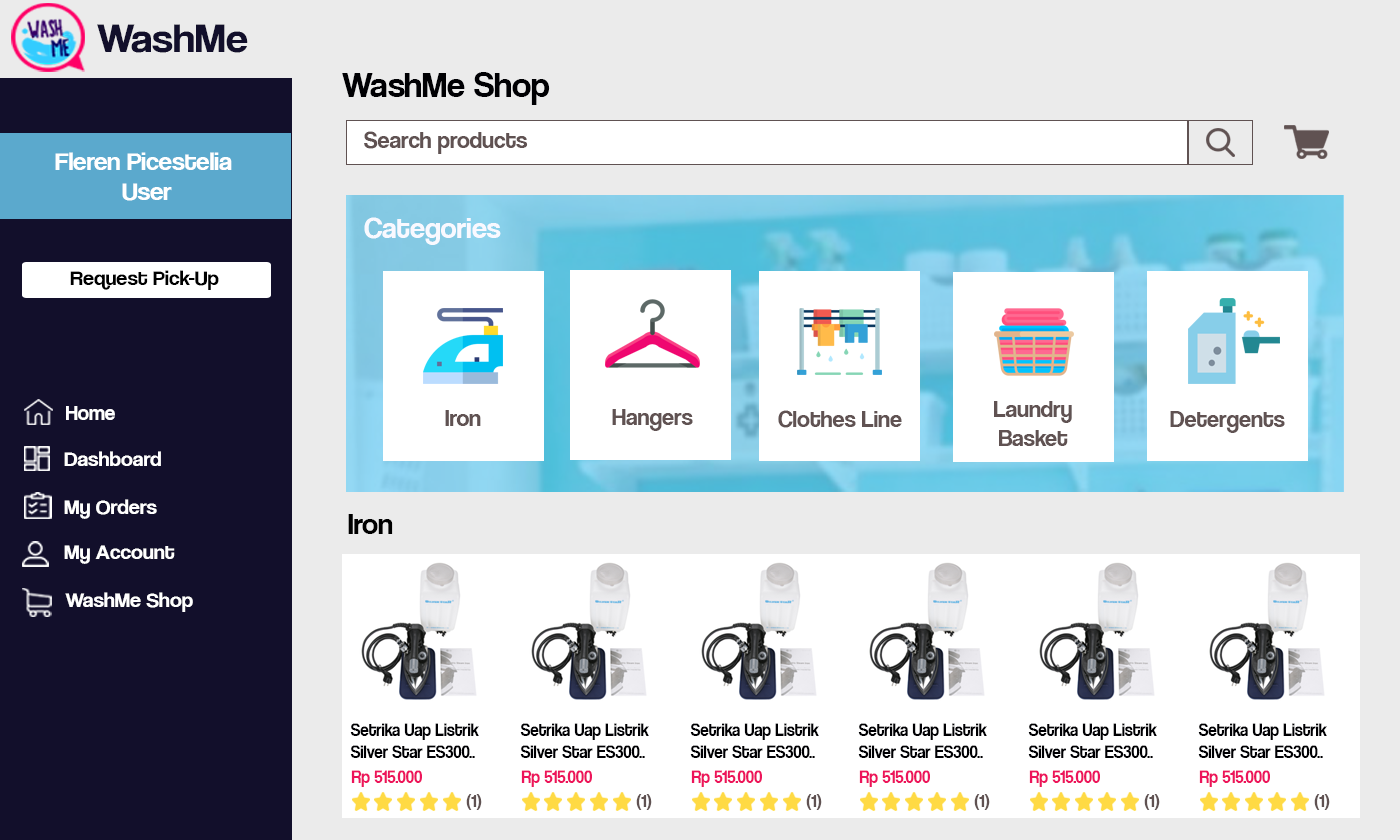
<style>
.page{position:relative;width:1400px;height:840px;background:#ebebeb}
.page>*{position:absolute;margin:0}
.t1{font:42.1px "CoolveticaRg-Regular";color:#120f2b;scale:1.05 1}
.t2{font:36px "CoolveticaRg-Regular";color:#000003}
.t3{font:24px "CoolveticaRg-Regular";color:#605252}
.t4{font:25.2px "CoolveticaRg-Regular";color:#ffffff;scale:1.05 1}
.t5{font:30px "CoolveticaRg-Regular";color:#f9f9ff}
.t6{font:21px "CoolveticaRg-Regular";color:#000000;scale:1.05 1}
.t7{font:21px "CoolveticaRg-Regular";color:#ffffff}
.t8{font:21px "CoolveticaRg-Regular";color:#ffffff;scale:1.05 1}
.t9{font:30px "CoolveticaRg-Regular";color:#000000}
.t10{font:18px "CoolveticaRg-Regular";color:#000003;scale:0.94 1}
.t11{font:18px "CoolveticaRg-Regular";color:#ed145b;scale:0.94 1}
.t12{font:18px "CoolveticaRg-Regular";color:#605252}
</style>
<div class="page">
<p class="t1" style="left:97px;top:24px;width:151px;height:29px">WashMe</p>
<p class="t2" style="left:342px;top:72px;width:208px;height:33px">WashMe Shop</p>
<p class="t3" style="left:364px;top:131px;width:164px;height:23px">Search products</p>
<p class="t4" style="left:55px;top:152px;width:177px;height:49px;text-align:center">Fleren Picestelia<br> User</p>
<p class="t5" style="left:364px;top:217px;width:137px;height:28px">Categories</p>
<p class="t6" style="left:70px;top:270px;width:149px;height:20px">Request Pick-Up</p>
<p class="t3" style="left:994px;top:401px;width:78px;height:45px;text-align:center">Laundry<br>Basket</p>
<p class="t7" style="left:66px;top:406px;width:49px;height:14px">Home</p>
<p class="t3" style="left:445px;top:410px;width:36px;height:16px">Iron</p>
<p class="t3" style="left:612px;top:409px;width:81px;height:22px">Hangers</p>
<p class="t3" style="left:778px;top:410px;width:124px;height:18px">Clothes Line</p>
<p class="t3" style="left:1170px;top:411px;width:115px;height:22px">Detergents</p>
<p class="t8" style="left:64px;top:451px;width:97px;height:15px">Dashboard</p>
<p class="t8" style="left:64px;top:499px;width:93px;height:20px">My Orders</p>
<p class="t9" style="left:348px;top:514px;width:45px;height:20px">Iron</p>
<p class="t8" style="left:64px;top:545px;width:111px;height:19px">My Account</p>
<p class="t8" style="left:65px;top:592px;width:128px;height:20px">WashMe Shop</p>
<p class="t10" style="left:350px;top:723px;width:129px;height:35px">Setrika Uap Listrik<br>Silver Star ES300..</p>
<p class="t10" style="left:520px;top:723px;width:129px;height:35px">Setrika Uap Listrik<br>Silver Star ES300..</p>
<p class="t10" style="left:690px;top:723px;width:129px;height:35px">Setrika Uap Listrik<br>Silver Star ES300..</p>
<p class="t10" style="left:858px;top:723px;width:129px;height:35px">Setrika Uap Listrik<br>Silver Star ES300..</p>
<p class="t10" style="left:1028px;top:723px;width:129px;height:35px">Setrika Uap Listrik<br>Silver Star ES300..</p>
<p class="t10" style="left:1198px;top:723px;width:129px;height:35px">Setrika Uap Listrik<br>Silver Star ES300..</p>
<p class="t11" style="left:351px;top:770px;width:71px;height:17px">Rp 515.000</p>
<p class="t11" style="left:521px;top:770px;width:71px;height:17px">Rp 515.000</p>
<p class="t11" style="left:691px;top:770px;width:71px;height:17px">Rp 515.000</p>
<p class="t11" style="left:859px;top:770px;width:71px;height:17px">Rp 515.000</p>
<p class="t11" style="left:1029px;top:770px;width:71px;height:17px">Rp 515.000</p>
<p class="t11" style="left:1199px;top:770px;width:71px;height:17px">Rp 515.000</p>
<p class="t12" style="left:466px;top:794px;width:16px;height:16px">(1)</p>
<p class="t12" style="left:636px;top:794px;width:16px;height:16px">(1)</p>
<p class="t12" style="left:806px;top:794px;width:16px;height:16px">(1)</p>
<p class="t12" style="left:974px;top:794px;width:16px;height:16px">(1)</p>
<p class="t12" style="left:1144px;top:794px;width:16px;height:16px">(1)</p>
<p class="t12" style="left:1314px;top:794px;width:16px;height:16px">(1)</p>
</div>
